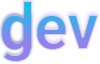
<style>
.page{position:relative;width:100px;height:64px;background:#ffffff}
.page>*{position:absolute;margin:0}
.t1{font:63.7px "Roboto-Bold"}
</style>
<div class="page">
<p class="t1" style="left:2px;top:1px;width:97px;height:49px">dev</p>
<p class="t1" style="left:1px;top:15px;width:31px;height:47px">g</p>
</div>
